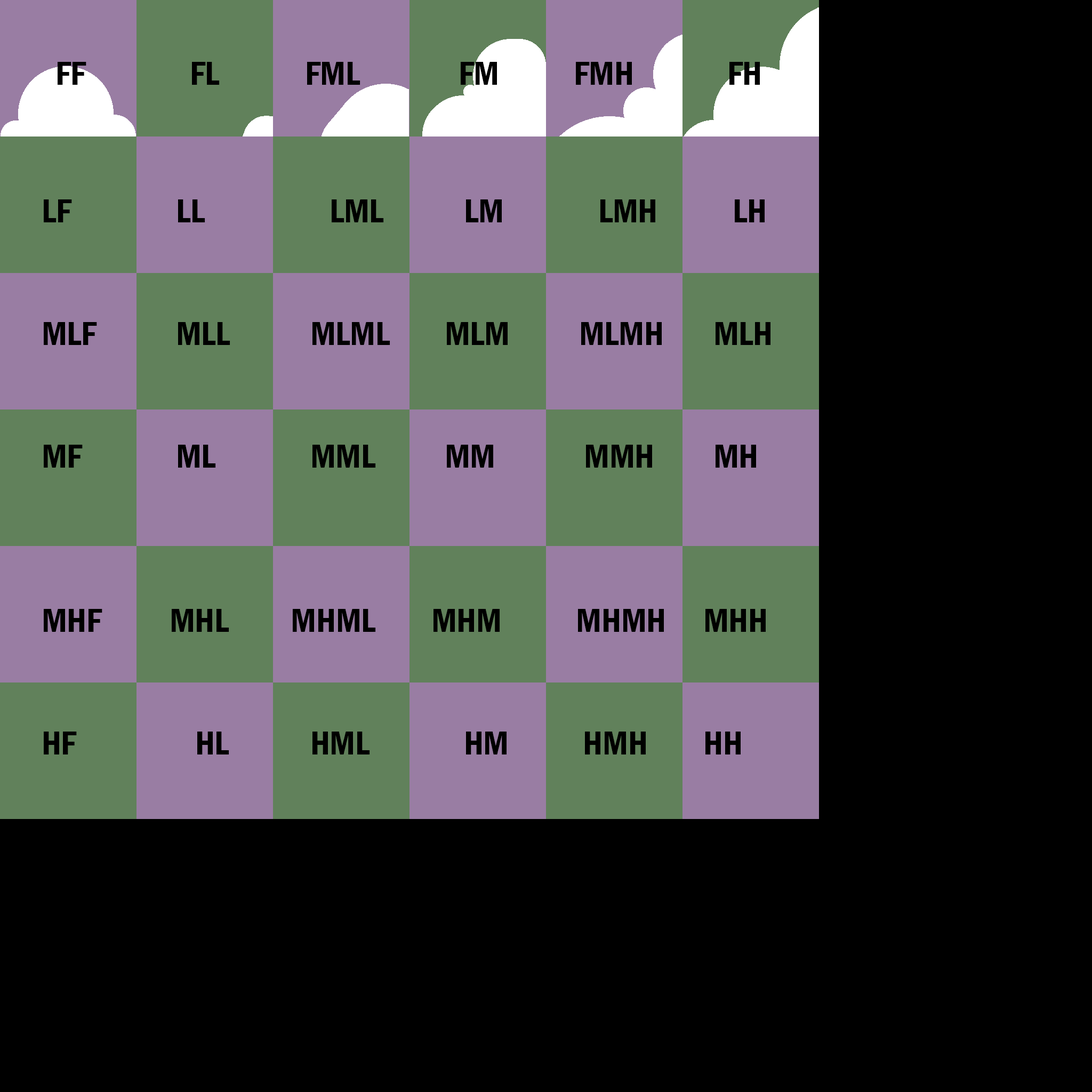
<style>
.page{position:relative;width:1092px;height:1092px;background:#000000}
.page>*{position:absolute;margin:0}
.t1{font:34.1px "FranklinGothic-DemiCond";letter-spacing:-0.005em;color:#000000}
</style>
<div class="page">
<p class="t1" style="left:58px;top:62px;width:702px;height:23px">FF      FL     FML      FM    FMH     FH</p>
<p class="t1" style="left:44px;top:199px;width:726px;height:555px">LF      LL       LML     LM     LMH    LH<br><br><br>MLF     MLL     MLML   MLM    MLMH   MLH<br><br><br>MF     ML     MML    MM          MMH    MH<br><br><br><br>MHF           MHL          MHML         MHM            MHMH      MHH<br><br><br>HF               HL     HML     HM            HMH         HH</p>
</div>
